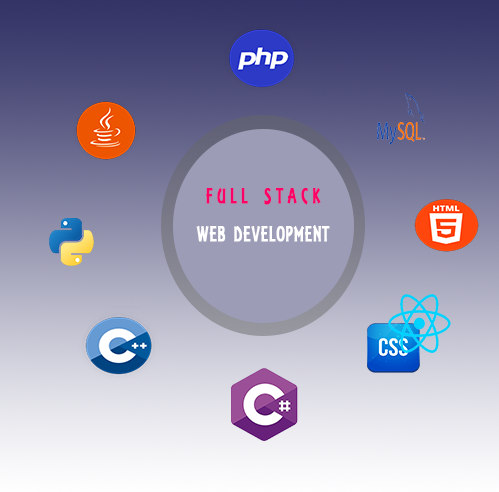
<style>
.page{position:relative;width:499px;height:492px}
.page>*{position:absolute;margin:0}
.t1{font:23px "ARESSENCE";letter-spacing:0.04em;color:#ffffff;font-weight:bold;scale:0.69 1}
.t2{font:23px "ARESSENCE";letter-spacing:0.28em;color:#ff0066;font-weight:bold;scale:0.69 1}
</style>
<div class="page">
<p class="t1" style="left:196px;top:188px;width:134px;height:54px;text-align:center"><span class="t2">FULL STACK<br> <br></span>WEB DEVELOPMENT</p>
</div>
